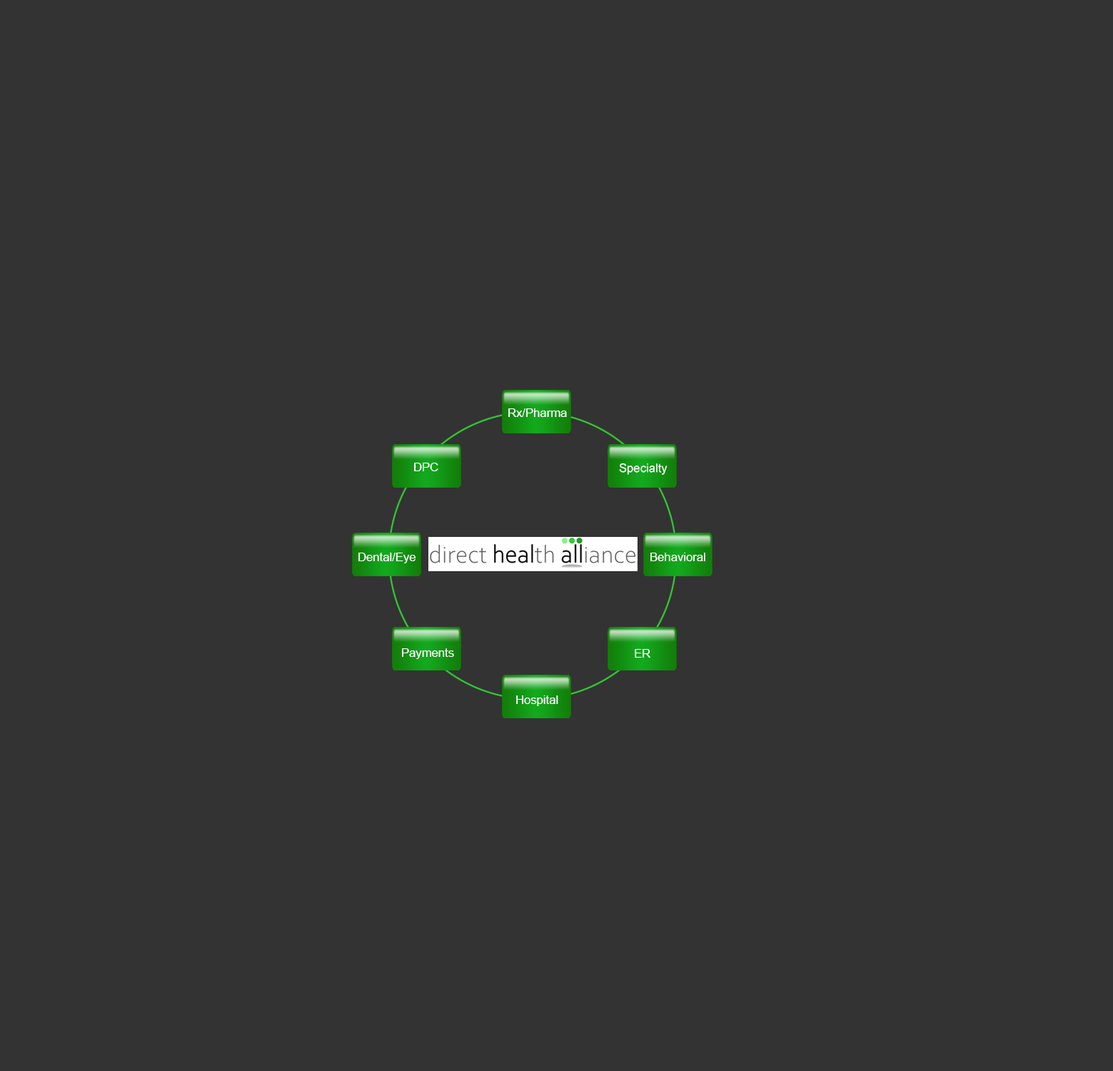
<style>
.page{position:relative;width:1113px;height:1071px;background:#333333}
.page>*{position:absolute;margin:0}
.t1{font:11.9px "ArialMT";color:#ffffff}
</style>
<div class="page">
<p class="t1" style="left:508px;top:408px;width:59px;height:9px">Rx/Pharma</p>
<p class="t1" style="left:414px;top:463px;width:24px;height:8px">DPC</p>
<p class="t1" style="left:619px;top:463px;width:49px;height:12px">Specialty</p>
<p class="t1" style="left:358px;top:553px;width:58px;height:10px">Dental/Eye</p>
<p class="t1" style="left:651px;top:553px;width:55px;height:8px">Behavioral</p>
<p class="t1" style="left:402px;top:648px;width:52px;height:11px">Payments</p>
<p class="t1" style="left:635px;top:649px;width:16px;height:9px">ER</p>
<p class="t1" style="left:516px;top:696px;width:42px;height:10px">Hospital</p>
</div>
